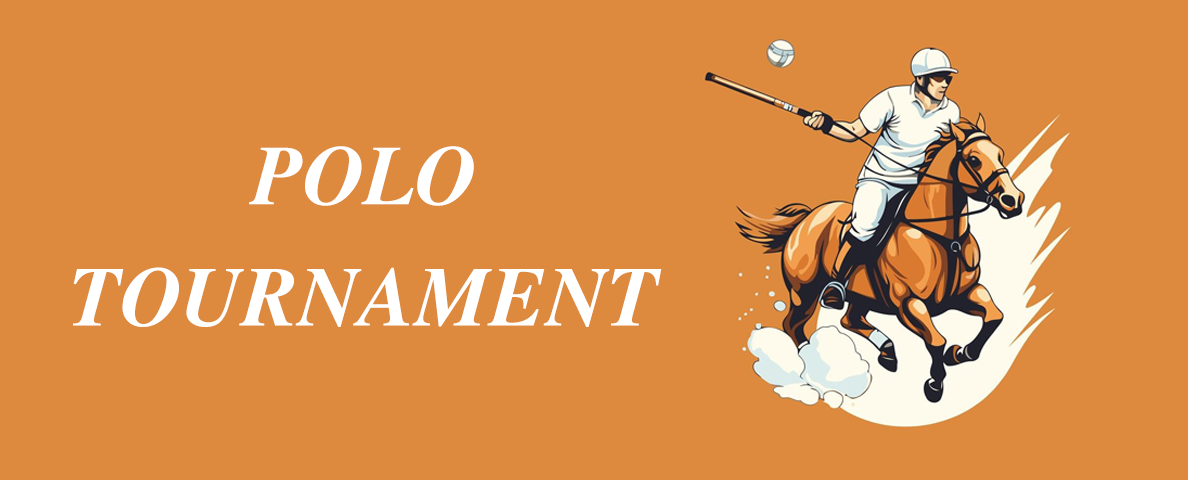
<style>
.page{position:relative;width:1188px;height:480px;background:#dd8a3e}
.page>*{position:absolute;margin:0}
.t1{font:84.2px/121.2px "Times-BoldItalic";color:#ffffff}
</style>
<div class="page">
<p class="t1" style="left:73px;top:146px;width:589px;height:181px;text-align:center">POLO<br>TOURNAMENT</p>
</div>
